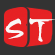
<style>
.page{position:relative;width:55px;height:55px;background:#333333}
.page>*{position:absolute;margin:0}
.t1{font:18px "VNI-HLThuphap";color:#f9f6f6}
</style>
<div class="page">
<p class="t1" style="left:5px;top:18px;width:19px;height:21px">S</p>
<p class="t1" style="left:29px;top:18px;width:27px;height:24px">T</p>
</div>
